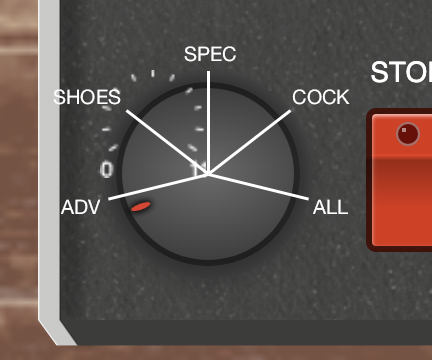
<style>
.page{position:relative;width:432px;height:360px}
.page>*{position:absolute;margin:0}
.t1{font:20px "HelveticaNeue";color:#ffffff}
</style>
<div class="page">
<p class="t1" style="left:184px;top:46px;width:52px;height:16px">SPEC</p>
<p class="t1" style="left:53px;top:89px;width:68px;height:16px">SHOES</p>
<p class="t1" style="left:292px;top:89px;width:58px;height:16px">COCK</p>
<p class="t1" style="left:61px;top:199px;width:40px;height:15px">ADV</p>
<p class="t1" style="left:313px;top:199px;width:35px;height:15px">ALL</p>
</div>
